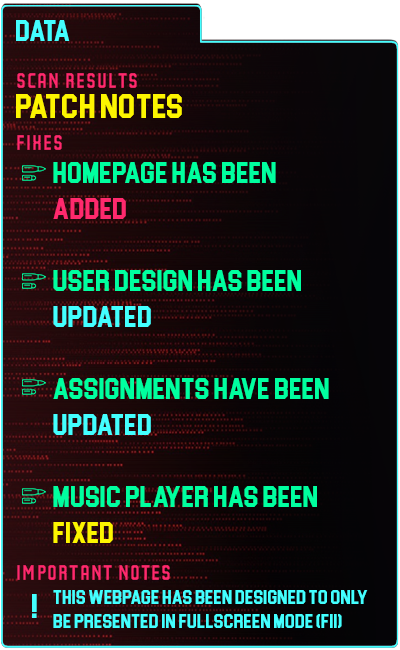
<style>
.page{position:relative;width:400px;height:650px}
.page>*{position:absolute;margin:0}
.t1{font:30px "Blockletter";color:#43ffff}
.t2{font:35px "Party-Lights-[WLM]-Flat";color:#ff296d}
.t3{font:35px "Blockletter";color:#fdf500}
.t4{font:30px "Blockletter";color:#00ff9f}
.t5{font:30px "Blockletter";color:#ff296d}
.t6{font:30px "Blockletter";color:#fdf500}
.t7{font:20px "Blockletter";color:#43ffff}
.t8{font:35px "Blockletter";color:#43ffff}
</style>
<div class="page">
<p class="t1" style="left:16px;top:20px;width:54px;height:21px">DATA</p>
<p class="t2" style="left:17px;top:73px;width:120px;height:15px">Scan REsults</p>
<p class="t3" style="left:16px;top:94px;width:166px;height:24px">PATCH NOTES</p>
<p class="t2" style="left:17px;top:135px;width:45px;height:15px">fixes</p>
<p class="t4" style="left:53px;top:162px;width:276px;height:381px">homepage has been <br><span class="t5"> added<br></span><br> user design has been  <span class="t1"><br> updated<br></span><br> assignments have been <span class="t1"><br> updated<br></span><br> music player has been<span class="t6"><br> fixed</span></p>
<p class="t2" style="left:17px;top:565px;width:153px;height:15px">important notes</p>
<p class="t7" style="left:53px;top:590px;width:315px;height:38px">this webpage has been designed to only<br> be presented in fullscreen mode (f11)</p>
<p class="t8" style="left:32px;top:594px;width:5px;height:24px">!</p>
</div>
